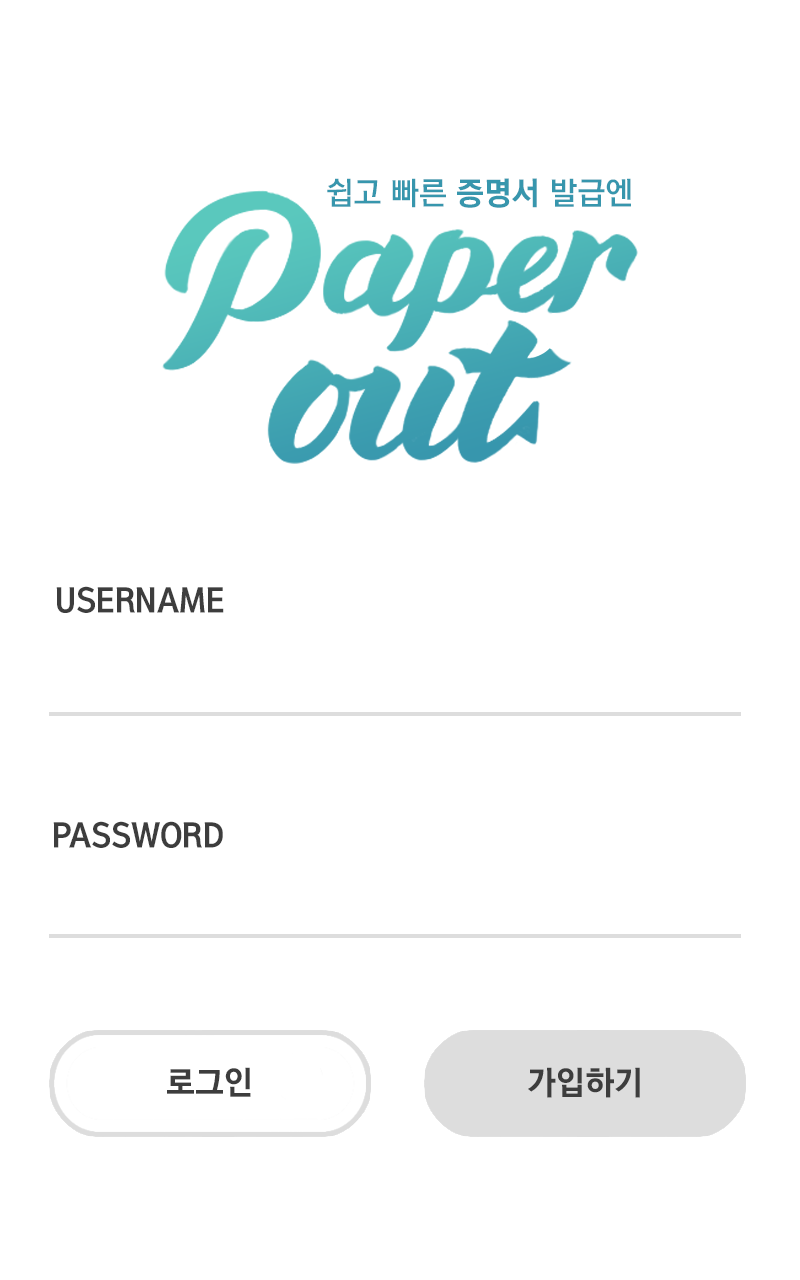
<style>
.page{position:relative;width:800px;height:1280px;background:#ffffff}
.page>*{position:absolute;margin:0}
.t1{font:31.9px "KoreanGD15-R";color:#3796ad}
.t2{font:31.9px "KoreanGD17-R";color:#3796ad}
.t3{font:33px "KoreanGD17-R";color:#3d3d3d}
</style>
<div class="page">
<p class="t1" style="left:327px;top:178px;width:304px;height:30px">쉽고 빠른 <span class="t2">증명서 </span>발급엔</p>
<p class="t3" style="left:56px;top:586px;width:168px;height:27px">USERNAME</p>
<p class="t3" style="left:53px;top:821px;width:170px;height:27px">PASSWORD</p>
<p class="t3" style="left:167px;top:1067px;width:84px;height:30px">로그인</p>
<p class="t3" style="left:528px;top:1067px;width:112px;height:31px">가입하기</p>
</div>
